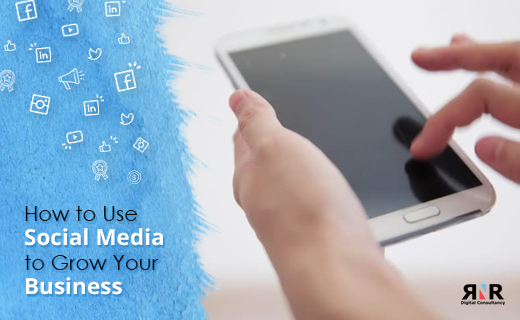
<style>
.page{position:relative;width:520px;height:320px}
.page>*{position:absolute;margin:0}
.t1{font:22.1px/24.4px "OpenSans-Bold";letter-spacing:0.01em;color:#ffffff}
.t2{font:20.6px/24.4px "CenturyGothic";letter-spacing:0.01em;color:#000000}
.t3{font:20.6px/24.4px "CenturyGothic";letter-spacing:0.01em;color:#010101}
</style>
<div class="page">
<p class="t1" style="left:24px;top:206px;width:139px;height:89px"><span class="t2">How to Use <br></span>Social Media   <br><span class="t2">to</span><span class="t3"> Grow Your <br></span>Business</p>
</div>
